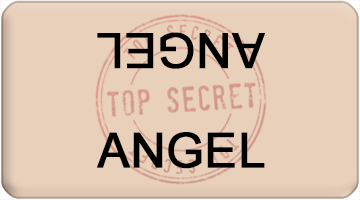
<style>
.page{position:relative;width:360px;height:200px;background:#e8d0bb}
.page>*{position:absolute;margin:0}
.t1{font:48px "ArialMT";color:#000000;font-weight:bold}
</style>
<div class="page">
<p class="t1" style="left:97px;top:32px;width:168px;height:37px;rotate:180deg">ANGEL</p>
<p class="t1" style="left:97px;top:132px;width:168px;height:37px">ANGEL</p>
</div>
